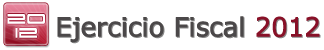
<style>
.page{position:relative;width:324px;height:50px;background:#ffffff}
.page>*{position:absolute;margin:0}
.t1{font:20px/14px "911Porscha";color:#ffffff}
.t2{font:26px "Verdana";letter-spacing:-0.025em;color:#4b4848;font-weight:bold}
.t3{font:26px "Verdana";letter-spacing:-0.025em;color:#881811;font-weight:bold}
.t4{font:26px "Verdana";letter-spacing:-0.025em;font-weight:bold}
</style>
<div class="page">
<p class="t1" style="left:7px;top:14px;width:38px;height:24px;text-align:center">20<br>12</p>
<p class="t2" style="left:57px;top:16px;width:263px;height:27px">Ejercicio Fiscal <span class="t3">2012</span></p>
<p class="t4" style="left:58px;top:17px;width:263px;height:27px">Ejercicio Fiscal 2012</p>
</div>
